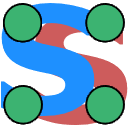
<style>
.page{position:relative;width:128px;height:128px;background:#1e90ff}
.page>*{position:absolute;margin:0}
.t1{font:150px "Verdana-Bold";color:#1e90ff}
.t2{font:220px "TimesNewRomanPS-BoldMT";color:#3cb371}
.t3{font:150px "Verdana-Bold"}
</style>
<div class="page">
<p class="t1" style="left:0px;top:2px;width:95px;height:114px">S</p>
<p class="t2" style="left:4px;top:4px;width:37px;height:37px">.</p>
<p class="t2" style="left:87px;top:4px;width:36px;height:37px">.</p>
<p class="t3" style="left:33px;top:11px;width:95px;height:114px">S</p>
<p class="t2" style="left:5px;top:86px;width:36px;height:37px">.</p>
<p class="t2" style="left:87px;top:86px;width:36px;height:37px">.</p>
</div>
